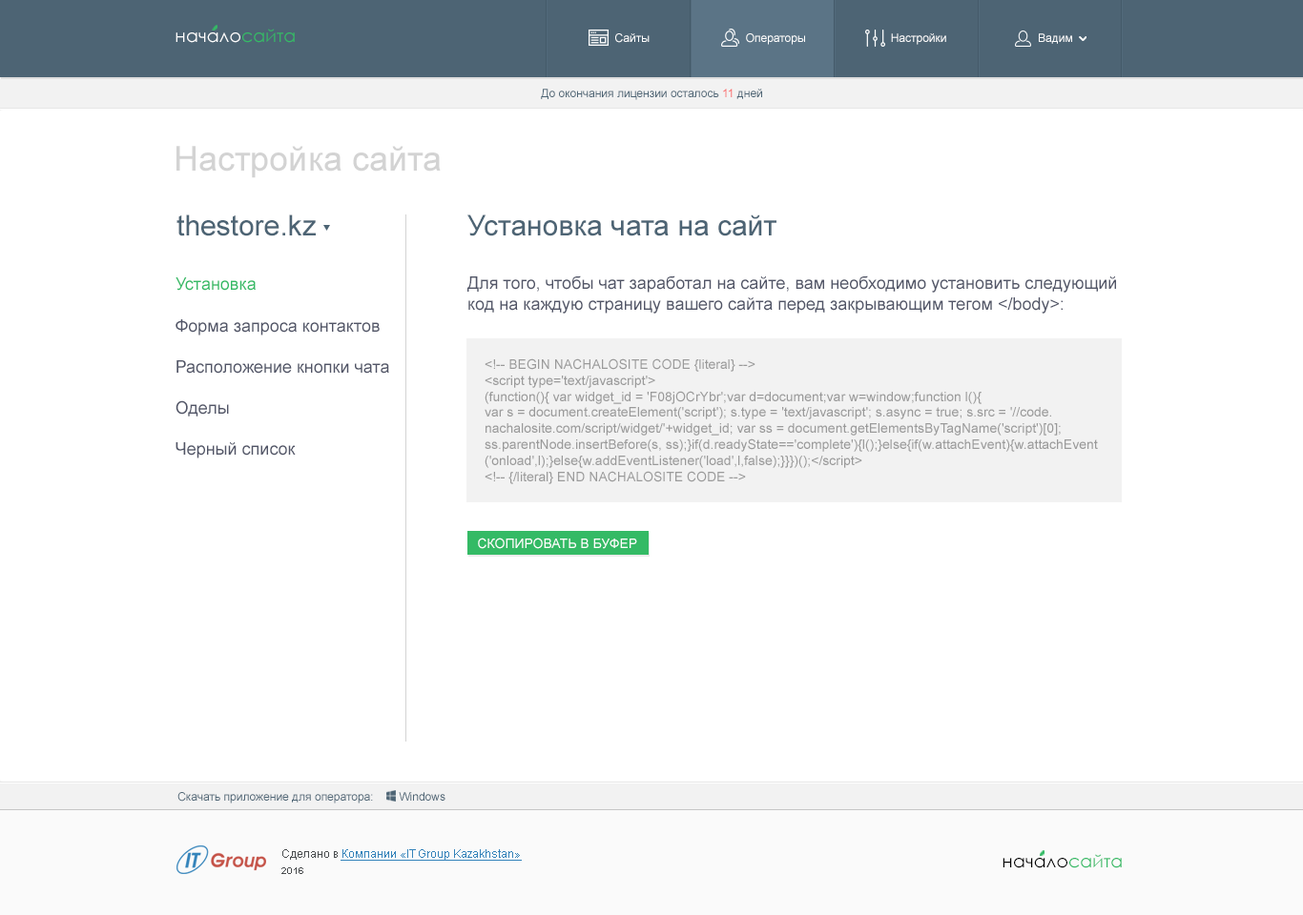
<style>
.page{position:relative;width:1303px;height:915px;background:#ffffff}
.page>*{position:absolute;margin:0}
.t1{font:17.7px "CenturyGothic";color:#ffffff}
.t2{font:17.7px "CenturyGothic";color:#34ba65}
.t3{font:11.4px "ArialMT";color:#ffffff}
.t4{font:11.4px "ArialMT";color:#4d6474}
.t5{font:11.4px "ArialMT";color:#f96969}
.t6{font:34.3px "ArialMT";color:#d3d3d3}
.t7{font:28.6px "ArialMT";color:#4d6474}
.t8{font:17.2px "ArialMT";color:#515567}
.t9{font:17.2px "ArialMT";color:#34ba65}
.t10{font:13.4px "ArialMT";color:#9a9a9a}
.t11{font:13.4px "ArialMT";color:#ffffff}
.t12{font:11.4px "ArialMT";color:#3483ba;text-decoration:underline}
.t13{font:11.4px "ArialMT";color:#4a4d4f}
.t14{font:17.7px "CenturyGothic";color:#000000}
.t15{font:9.5px "Arial-BoldMT";color:#4a4d4f}
</style>
<div class="page">
<p class="t1" style="left:175px;top:29px;width:120px;height:14px">начало<span class="t2">сайта</span></p>
<p class="t3" style="left:615px;top:33px;width:34px;height:10px">Сайты</p>
<p class="t3" style="left:746px;top:33px;width:59px;height:12px">Операторы</p>
<p class="t3" style="left:891px;top:33px;width:55px;height:12px">Настройки</p>
<p class="t3" style="left:1038px;top:33px;width:34px;height:11px">Вадим</p>
<p class="t4" style="left:541px;top:89px;width:221px;height:11px">До окончания лицензии осталось <span class="t5">11</span> дней</p>
<p class="t6" style="left:176px;top:146px;width:265px;height:32px">Настройка сайта</p>
<p class="t7" style="left:176px;top:215px;width:140px;height:21px">thestore.kz</p>
<p class="t7" style="left:467px;top:215px;width:309px;height:21px">Установка чата на сайт</p>
<p class="t8" style="left:175px;top:277px;width:214px;height:182px"><span class="t9">Установка<br></span><br>Форма запроса контактов<br><br>Расположение кнопки чата<br><br>Оделы<br><br>Черный список</p>
<p class="t8" style="left:467px;top:276px;width:649px;height:38px">Для того, чтобы чат заработал на сайте, вам необходимо установить следующий <br>код на каждую страницу вашего сайта перед закрывающим тегом &lt;/body&gt;:</p>
<p class="t10" style="left:484px;top:359px;width:614px;height:125px">&lt;!-- BEGIN NACHALOSITE CODE {literal} --&gt;<br>&lt;script type='text/javascript'&gt;<br>(function(){ var widget_id = 'F08jOCrYbr';var d=document;var w=window;function l(){<br>var s = document.createElement('script'); s.type = 'text/javascript'; s.async = true; s.src = '//code.<br>nachalosite.com/script/widget/'+widget_id; var ss = document.getElementsByTagName('script')[0]; <br>ss.parentNode.insertBefore(s, ss);}if(d.readyState=='complete'){l();}else{if(w.attachEvent){w.attachEvent<br>('onload',l);}else{w.addEventListener('load',l,false);}}})();&lt;/script&gt;<br>&lt;!-- {/literal} END NACHALOSITE CODE --&gt;</p>
<p class="t11" style="left:478px;top:538px;width:159px;height:11px">СКОПИРОВАТЬ В БУФЕР</p>
<p class="t4" style="left:177px;top:792px;width:268px;height:12px">Скачать приложение для оператора:        Windows</p>
<p class="t12" style="left:282px;top:850px;width:240px;height:11px"><span class="t13">Сделано в </span>Компании «IT Group Kazakhstan»</p>
<p class="t14" style="left:1002px;top:854px;width:119px;height:15px">начало<span class="t2">сайта</span></p>
<p class="t15" style="left:281px;top:868px;width:22px;height:6px">2016</p>
</div>
